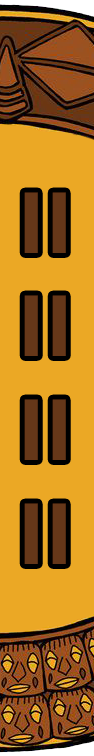
<style>
.page{position:relative;width:94px;height:756px;background:#eba825}
.page>*{position:absolute;margin:0}
.t1{font:86.5px "TTNorms-Bold";color:#663719}
</style>
<div class="page">
<p class="t1" style="left:24px;top:192px;width:42px;height:372px">II<br>II<br>II<br>II</p>
</div>
